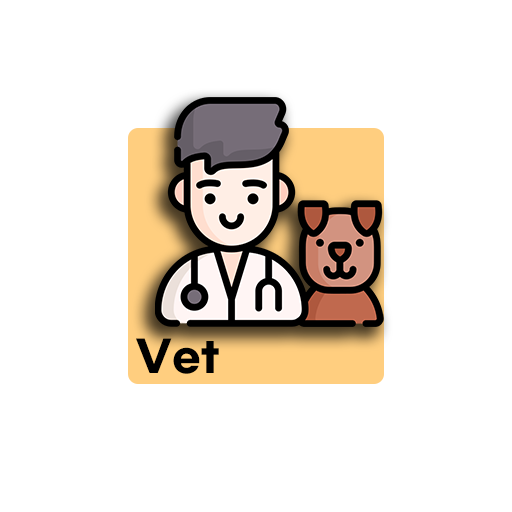
<style>
.page{position:relative;width:512px;height:512px;background:#ffffff}
.page>*{position:absolute;margin:0}
.t1{font:42.2px "GmarketSansTTFBold";color:#000000}
</style>
<div class="page">
<p class="t1" style="left:136px;top:338px;width:83px;height:36px">Vet</p>
</div>
